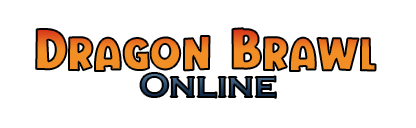
<style>
.page{position:relative;width:416px;height:128px;background:#ffffff}
.page>*{position:absolute;margin:0}
.t1{font:48px "VanillaDreamers";color:#db8c0f}
.t2{font:60px "VanillaDreamers";color:#db8c0f}
.t3{font:36px "CopperplateGothic-Bold"}
</style>
<div class="page">
<p class="t1" style="left:36px;top:28px;width:340px;height:43px"><span class="t2">D</span>ragon<span class="t2"> B</span>rawl</p>
<p class="t3" style="left:140px;top:73px;width:136px;height:25px">Online</p>
</div>
